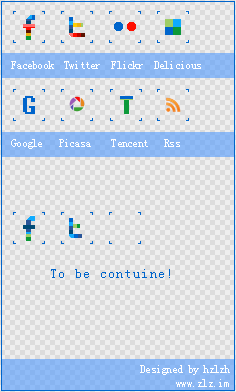
<style>
.page{position:relative;width:236px;height:392px;background:#dcdcdc}
.page>*{position:absolute;margin:0}
.t1{font:12px "SimSun";letter-spacing:-0.06em;color:#ffffff}
.t2{font:13px "SimSun";letter-spacing:0.1em;color:#0065cc}
</style>
<div class="page">
<p class="t1" style="left:11px;top:61px;width:190px;height:8px">Facebook  Twitter  Flickr  Delicious</p>
<p class="t1" style="left:11px;top:139px;width:169px;height:10px">Google   Picasa    Tencent   Rss</p>
<p class="t2" style="left:51px;top:269px;width:119px;height:9px">To be contuine!</p>
<p class="t1" style="left:140px;top:365px;width:90px;height:10px">Designed by hzlzh</p>
<p class="t1" style="left:176px;top:379px;width:53px;height:8px">www.zlz.im</p>
</div>
